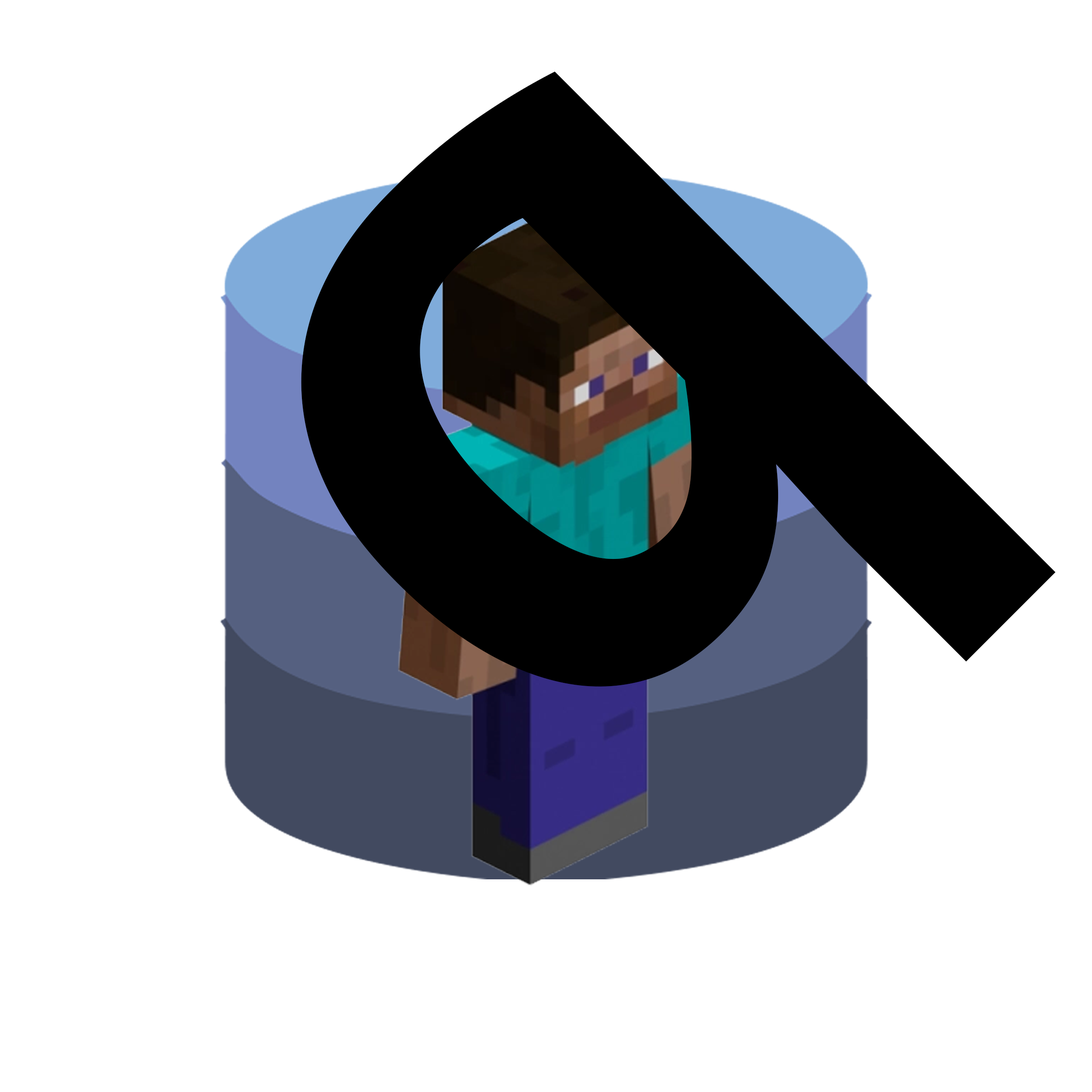
<style>
.page{position:relative;width:1092px;height:1092px;background:#ffffff}
.page>*{position:absolute;margin:0}
.t1{font:1059.5px "Consolas-Bold";color:#000000}
</style>
<div class="page">
<p class="t1" style="left:301px;top:71px;width:754px;height:616px;rotate:135deg">b</p>
</div>
